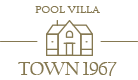
<style>
.page{position:relative;width:138px;height:80px;background:#ffffff}
.page>*{position:absolute;margin:0}
.t1{font:11px "HighTowerText-Reg";letter-spacing:-0.03em;color:#857851}
.t2{font:20px "CalifornianFB-Reg";letter-spacing:-0.03em;color:#857851}
</style>
<div class="page">
<p class="t1" style="left:35px;top:6px;width:65px;height:7px">POOL VILLA</p>
<p class="t2" style="left:18px;top:62px;width:99px;height:14px">TOWN 1967</p>
</div>
